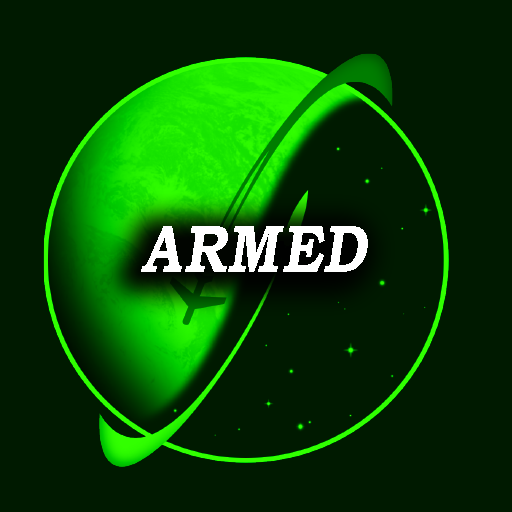
<style>
.page{position:relative;width:512px;height:512px;background:#001a00}
.page>*{position:absolute;margin:0}
.t1{font:66.9px "BookmanOldStyle-Bold";letter-spacing:0.013em;color:#ffffff;font-style:italic;scale:0.84 1}
</style>
<div class="page">
<p class="t1" style="left:141px;top:226px;width:227px;height:46px">ARMED</p>
</div>
